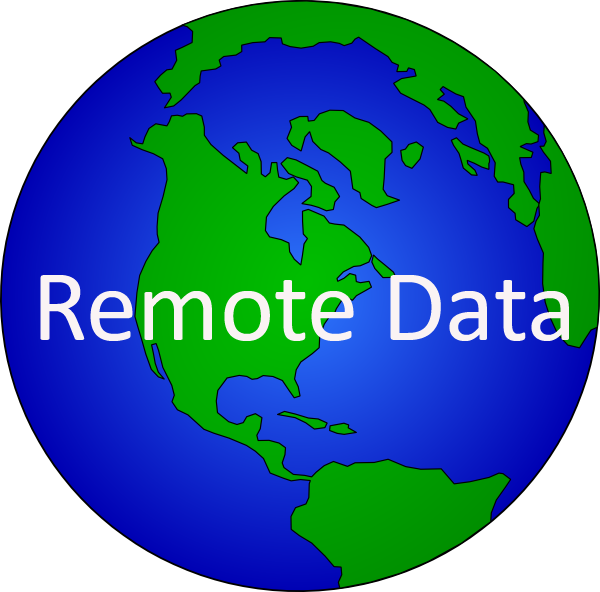
<style>
.page{position:relative;width:600px;height:592px;background:#ffffff}
.page>*{position:absolute;margin:0}
.t1{font:103px "Calibri";color:#faf3f4}
</style>
<div class="page">
<p class="t1" style="left:40px;top:275px;width:529px;height:66px">Remote Data</p>
</div>
